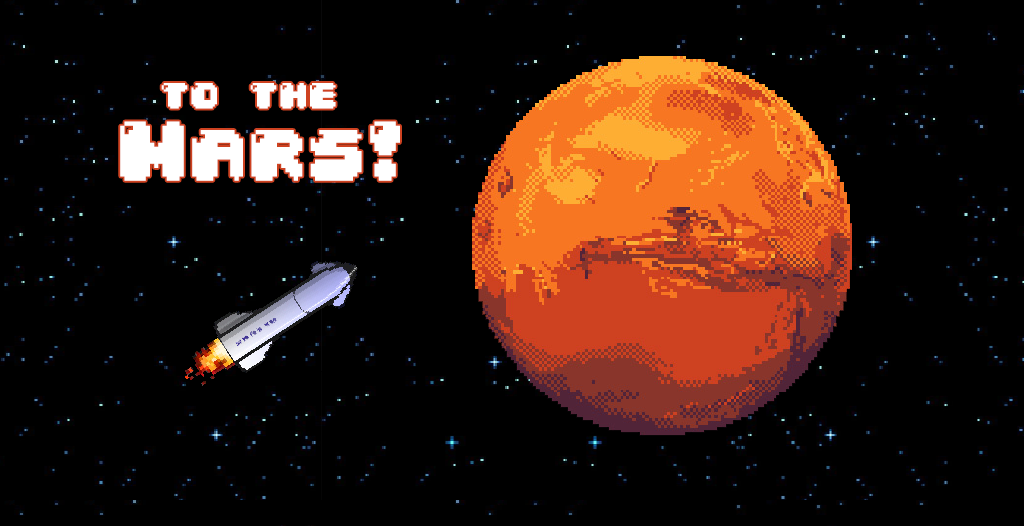
<style>
.page{position:relative;width:1024px;height:526px;background:#000000}
.page>*{position:absolute;margin:0}
.t1{font:36px "04b30";color:#ffffff}
.t2{font:72px "04b30";color:#ffffff}
</style>
<div class="page">
<p class="t1" style="left:161px;top:83px;width:175px;height:26px">to the</p>
<p class="t2" style="left:120px;top:121px;width:280px;height:60px">Mars!</p>
</div>
